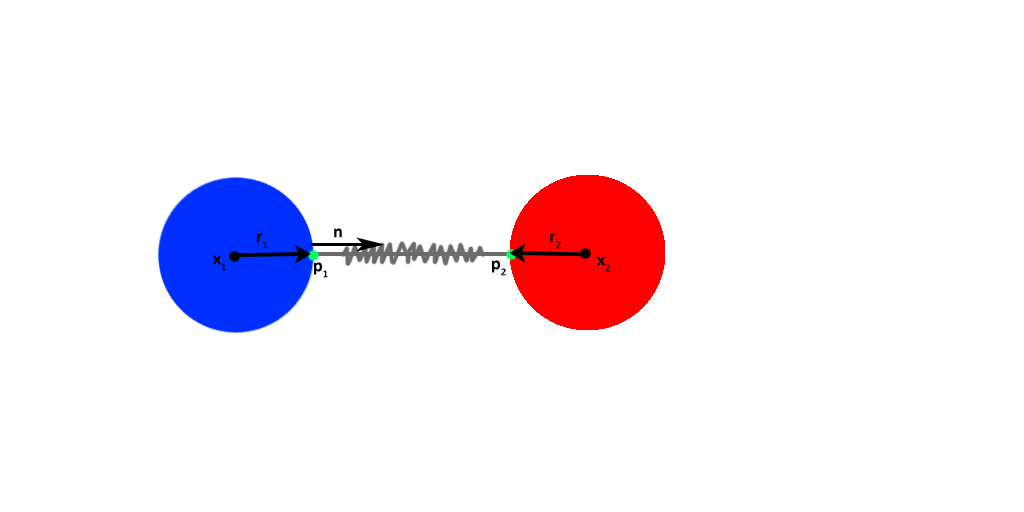
<style>
.page{position:relative;width:1024px;height:512px;background:#ffffff}
.page>*{position:absolute;margin:0}
.t1{font:18px "Calibri-Bold";color:#000000}
</style>
<div class="page">
<p class="t1" style="left:257px;top:233px;width:11px;height:16px">r1</p>
<p class="t1" style="left:334px;top:228px;width:8px;height:10px">n</p>
<p class="t1" style="left:550px;top:233px;width:11px;height:16px">r2</p>
<p class="t1" style="left:213px;top:255px;width:13px;height:16px">x1</p>
<p class="t1" style="left:597px;top:256px;width:13px;height:16px">x2</p>
<p class="t1" style="left:314px;top:262px;width:14px;height:16px">p1</p>
<p class="t1" style="left:492px;top:260px;width:14px;height:16px">p2</p>
</div>
